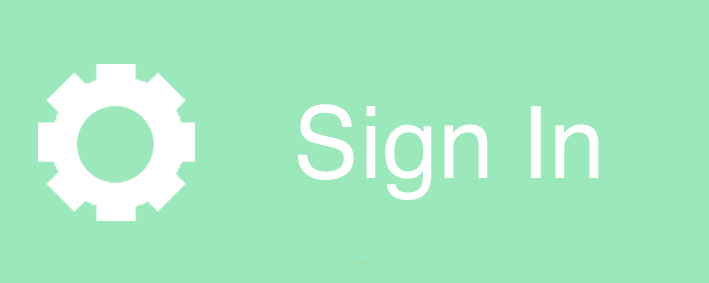
<style>
.page{position:relative;width:709px;height:283px;background:#9be8bb}
.page>*{position:absolute;margin:0}
.t1{font:100px "Helvetica";color:#ffffff}
</style>
<div class="page">
<p class="t1" style="left:298px;top:104px;width:301px;height:96px">Sign In</p>
</div>
